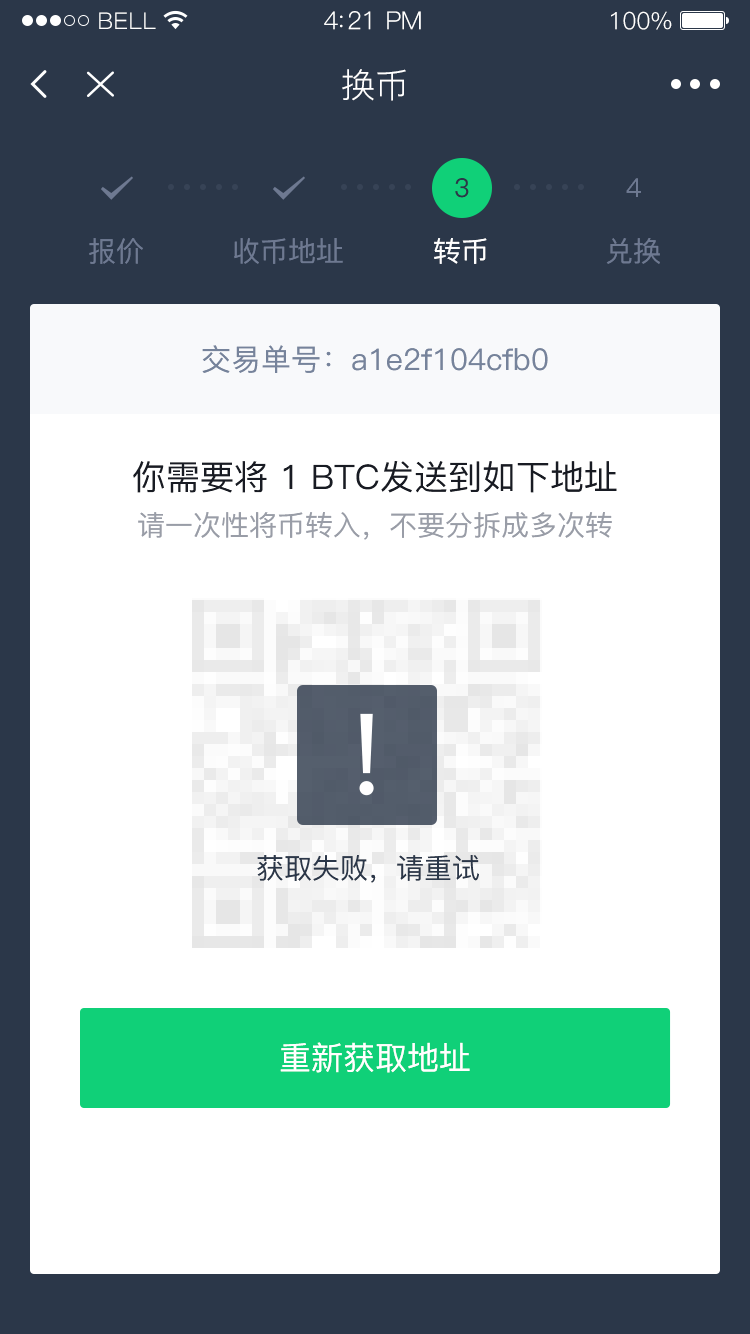
<style>
.page{position:relative;width:750px;height:1334px;background:#ffffff}
.page>*{position:absolute;margin:0}
.t1{font:23px "PingFang-SC-Regular";letter-spacing:0.02em;color:#ffffff}
.t2{font:25px "PingFang-SC-Regular";letter-spacing:-0.02em;color:#ffffff}
.t3{font:24px "PingFang-SC-Regular";letter-spacing:-0.02em;color:#ffffff}
.t4{font:34px "PingFang-SC-Regular";color:#ffffff}
.t5{font:26px "PingFang-SC-Medium";color:#2b3749}
.t6{font:26px "PingFang-SC-Medium";color:#6e7991}
.t7{font:28px "PingFang-SC-Medium";color:#6e7991}
.t8{font:28px "PingFang-SC-Medium";color:#ffffff}
.t9{font:30px "PingFang-SC-Medium";color:#76839b}
.t10{font:34px/46px "PingFang-SC-Medium";color:#181b23}
.t11{font:28px/46px "PingFang-SC-Medium";color:#999da7}
.t12{font:28px "PingFang-SC-Medium";color:#2b3749}
.t13{font:32px "PingFang-SC-Medium";color:#ffffff}
</style>
<div class="page">
<p class="t1" style="left:99px;top:12px;width:57px;height:17px">BELL</p>
<p class="t2" style="left:324px;top:11px;width:97px;height:19px">4:21 PM</p>
<p class="t3" style="left:611px;top:11px;width:61px;height:19px">100%</p>
<p class="t4" style="left:342px;top:69px;width:64px;height:32px">换币</p>
<p class="t5" style="left:455px;top:178px;width:14px;height:20px">3</p>
<p class="t6" style="left:626px;top:178px;width:15px;height:19px">4</p>
<p class="t7" style="left:89px;top:238px;width:54px;height:26px">报价</p>
<p class="t7" style="left:234px;top:238px;width:109px;height:26px">收币地址</p>
<p class="t8" style="left:434px;top:238px;width:53px;height:26px">转币</p>
<p class="t7" style="left:606px;top:238px;width:54px;height:26px">兑换</p>
<p class="t9" style="left:202px;top:345px;width:346px;height:28px">交易单号：a1e2f104cfb0</p>
<p class="t10" style="left:133px;top:461px;width:484px;height:79px;text-align:center">你需要将 1 BTC发送到如下地址<br><span class="t11">请一次性将币转入，不要分拆成多次转</span></p>
<p class="t12" style="left:257px;top:855px;width:222px;height:28px">获取失败，请重试</p>
<p class="t13" style="left:280px;top:1042px;width:190px;height:31px">重新获取地址</p>
</div>
